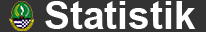
<style>
.page{position:relative;width:206px;height:32px;background:#333333}
.page>*{position:absolute;margin:0}
.t1{font:39px "Arial-BoldMT";color:#ffffff}
</style>
<div class="page">
<p class="t1" style="left:45px;top:1px;width:151px;height:28px">Statistik</p>
</div>
